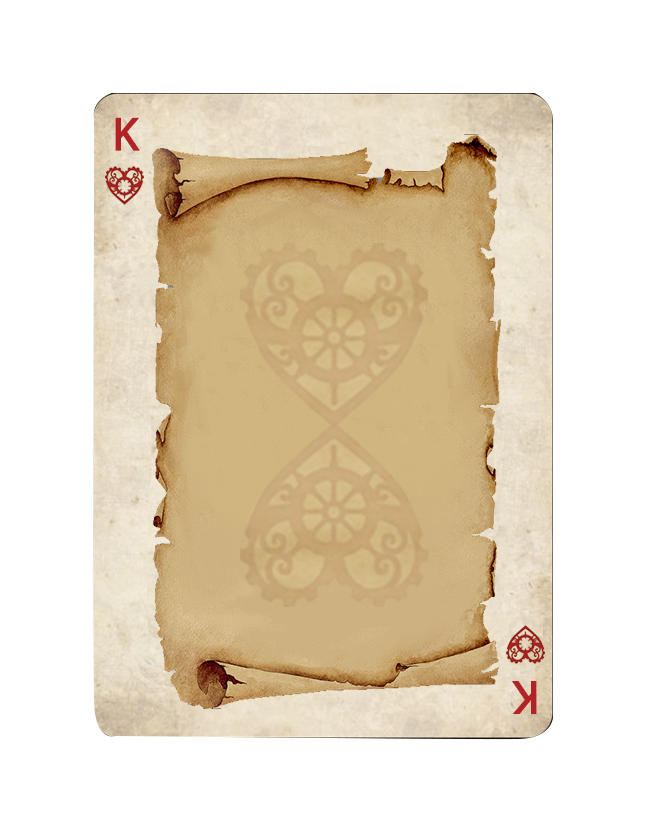
<style>
.page{position:relative;width:645px;height:831px;background:#ffffff}
.page>*{position:absolute;margin:0}
.t1{font:48px "MyriadPro-Regular";color:#b22327;font-weight:bold}
</style>
<div class="page">
<p class="t1" style="left:115px;top:117px;width:25px;height:34px">K</p>
<p class="t1" style="left:512px;top:681px;width:25px;height:33px;rotate:180deg">K</p>
</div>
